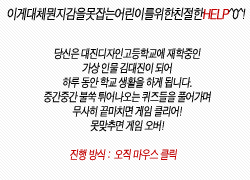
<style>
.page{position:relative;width:250px;height:180px;background:#ffffff}
.page>*{position:absolute;margin:0}
.t1{font:14px "H2gtrM";letter-spacing:-0.1em;color:#000000;font-style:italic;scale:0.8 1}
.t2{font:14px "H2gtrM";letter-spacing:-0.1em;color:#c30000;font-weight:bold;font-style:italic;scale:0.8 1}
.t3{font:12px "H2gtrM";letter-spacing:-0.1em;color:#000000;font-style:italic;scale:0.8 1}
.t4{font:12px "H2gtrM";letter-spacing:-0.1em;color:#c20000;font-style:italic;scale:0.8 1}
</style>
<div class="page">
<p class="t1" style="left:7px;top:7px;width:239px;height:14px">이게대체뭔지감을못잡는어린이를위한친절한<span class="t2">HELP</span>^0^!</p>
<p class="t3" style="left:44px;top:48px;width:167px;height:84px;text-align:center">당신은 대진디자인고등학교에 재학중인 <br>가상 인물 김대진이 되어 <br>하루 동안 학교 생활을 하게 됩니다. <br>중간중간 불쑥 튀어나오는 퀴즈들을 풀어가며 <br>무사히 끝마치면 게임 클리어! <br>못맞추면 게임 오버!</p>
<p class="t4" style="left:70px;top:149px;width:107px;height:12px">진행 방식 :  오직 마우스 클릭</p>
</div>
